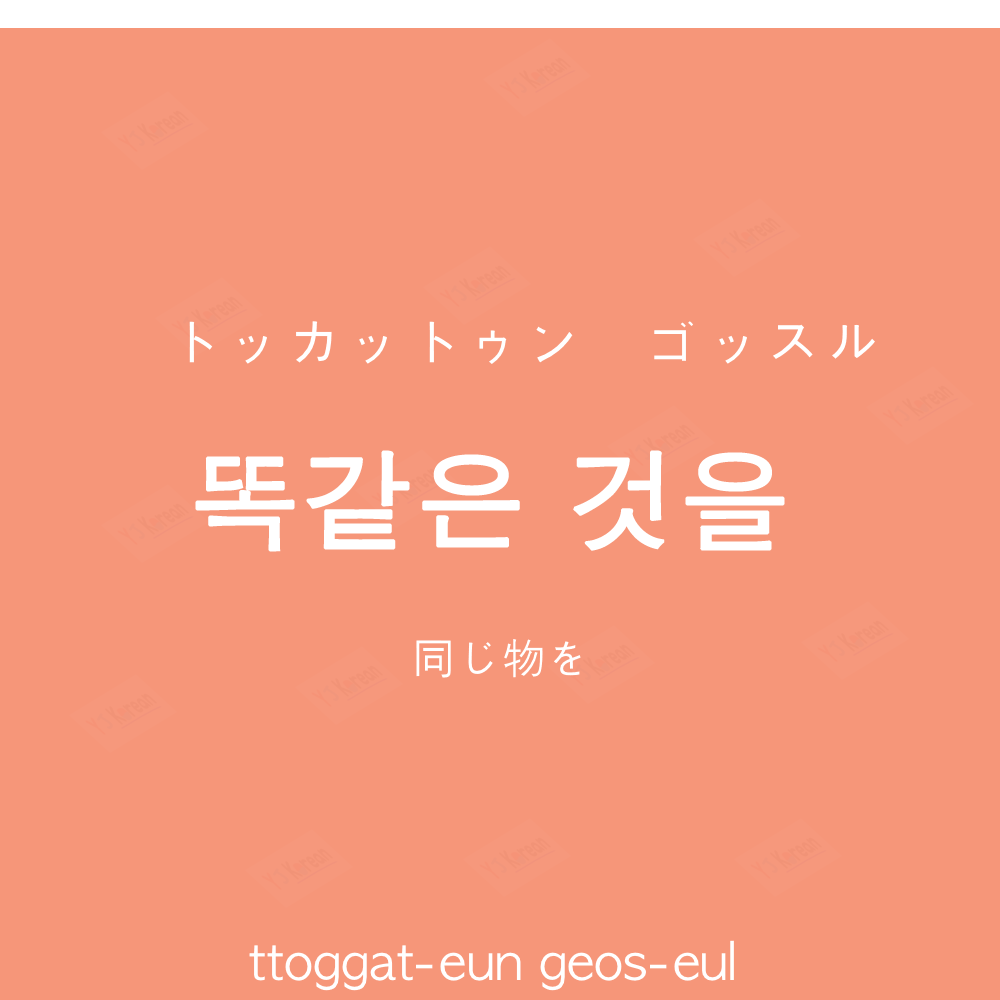
<style>
.page{position:relative;width:1000px;height:1000px;background:#f69679}
.page>*{position:absolute;margin:0}
.t1{font:60px "AppleGothic";color:#ffffff}
.t2{font:110px "AppleGothic";color:#ffffff;font-weight:bold}
.t3{font:45px "AppleGothic";color:#ffffff}
.t4{font:50px "AppleGothic";color:#ffffff}
</style>
<div class="page">
<p class="t1" style="left:189px;top:321px;width:686px;height:43px">トッカットゥン　ゴッスル</p>
<p class="t2" style="left:195px;top:450px;width:590px;height:102px">똑같은 것을</p>
<p class="t3" style="left:416px;top:639px;width:165px;height:39px">同じ物を</p>
<p class="t4" style="left:249px;top:940px;width:485px;height:51px">ttoggat-eun geos-eul</p>
</div>
